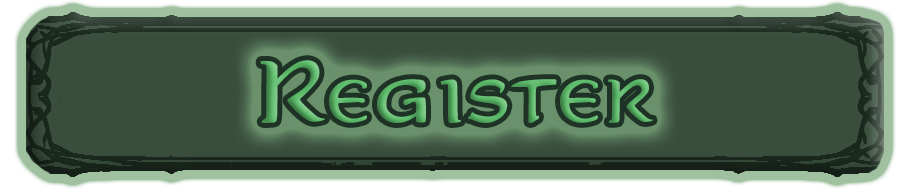
<style>
.page{position:relative;width:906px;height:195px;background:#394e3d}
.page>*{position:absolute;margin:0}
.t1{font:86.4px "MiddleEarth";color:#5bba69}
</style>
<div class="page">
<p class="t1" style="left:260px;top:60px;width:393px;height:63px">Register</p>
</div>
